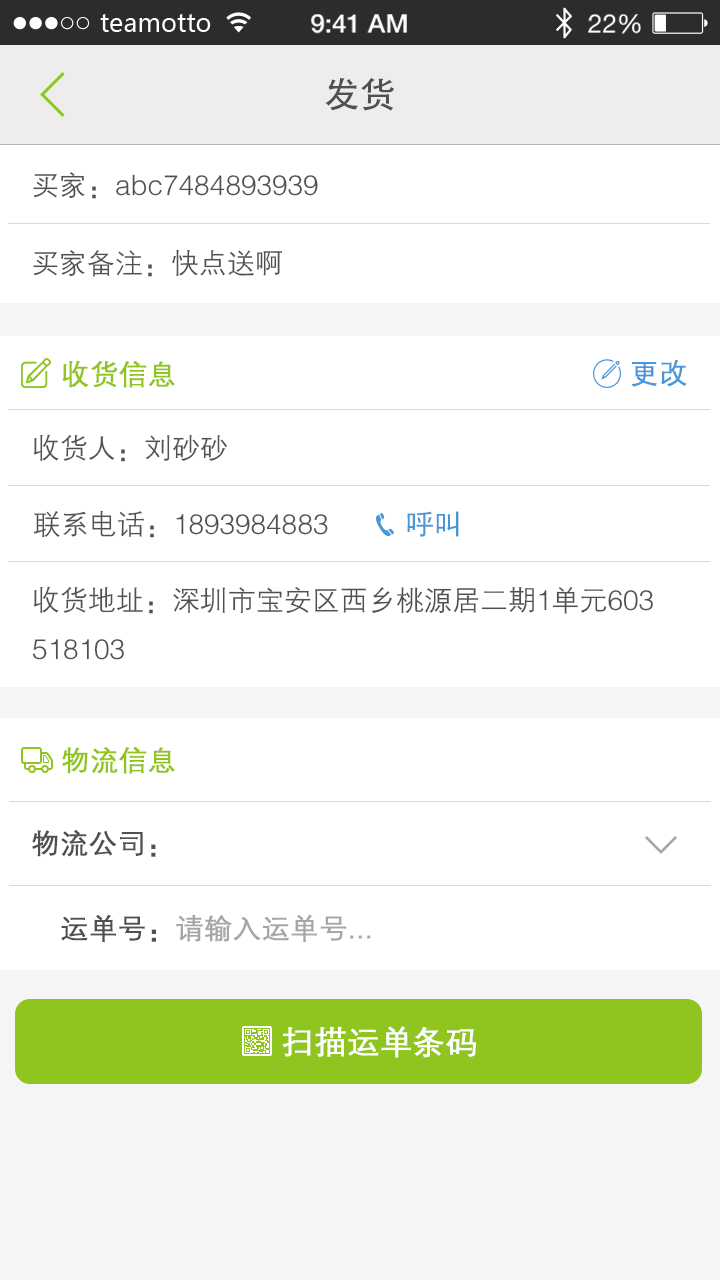
<style>
.page{position:relative;width:720px;height:1280px;background:#ffffff}
.page>*{position:absolute;margin:0}
.t1{font:36px "AdobeHeitiStd-Regular";color:#505050}
.t2{font:28px "FZZDXJW--GB1-0";color:#505050}
.t3{font:28px "FZZDXJW--GB1-0";color:#90c51f;font-weight:bold}
.t4{font:28px "FZZDXJW--GB1-0";color:#4997d9;font-weight:bold}
.t5{font:28px "SimHei";color:#4997d9}
.t6{font:28px "FZZDXJW--GB1-0";color:#505050;font-weight:bold}
.t7{font:28px "FZZDXJW--GB1-0";color:#a6a6a6;font-weight:bold}
.t8{font:32px "FZZDXJW--GB1-0";color:#ffffff;font-weight:bold}
</style>
<div class="page">
<p class="t1" style="left:325px;top:77px;width:69px;height:34px">发货</p>
<p class="t2" style="left:33px;top:172px;width:285px;height:27px">买家：abc7484893939</p>
<p class="t2" style="left:33px;top:249px;width:249px;height:28px">买家备注：快点送啊</p>
<p class="t3" style="left:62px;top:360px;width:113px;height:28px">收货信息</p>
<p class="t4" style="left:631px;top:359px;width:56px;height:28px">更改</p>
<p class="t2" style="left:33px;top:434px;width:194px;height:28px">收货人：刘砂砂</p>
<p class="t2" style="left:34px;top:510px;width:425px;height:28px">联系电话：1893984883          <span class="t5">呼叫</span></p>
<p class="t2" style="left:32px;top:586px;width:621px;height:74px">收货地址：深圳市宝安区西乡桃源居二期1单元603<br>518103</p>
<p class="t3" style="left:62px;top:747px;width:113px;height:27px">物流信息</p>
<p class="t6" style="left:32px;top:830px;width:124px;height:27px">物流公司：</p>
<p class="t7" style="left:61px;top:914px;width:310px;height:28px"><span class="t6">运单号：</span>请输入运单号...</p>
<p class="t8" style="left:282px;top:1026px;width:194px;height:32px">扫描运单条码</p>
</div>
